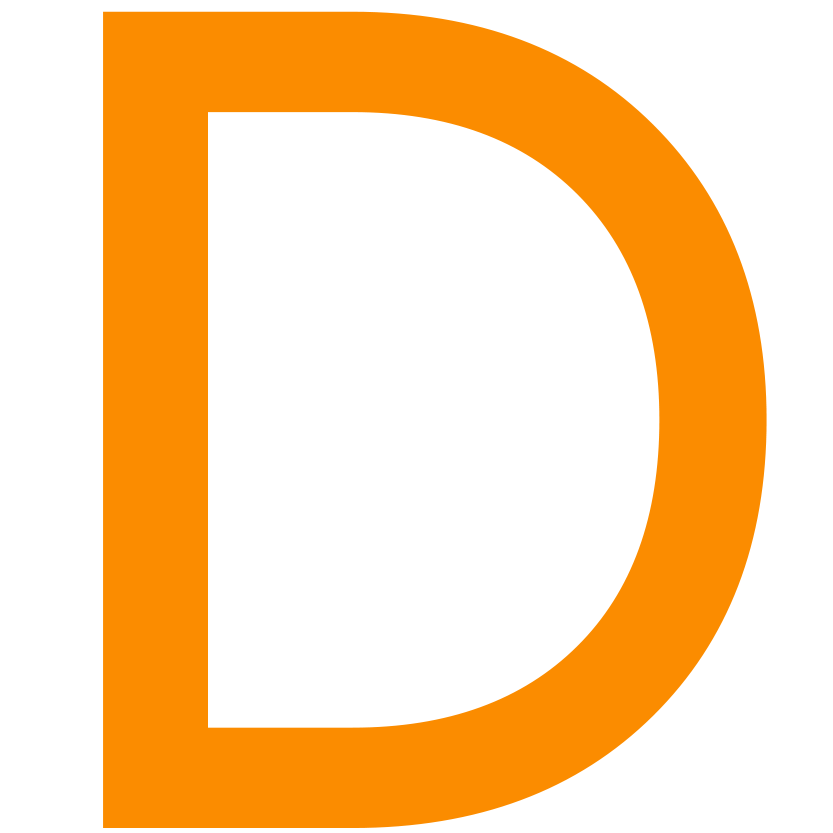
<style>
.page{position:relative;width:833px;height:833px;background:#ffffff}
.page>*{position:absolute;margin:0}
.t1{font:1140px "ProductSans-Regular";color:#fb8c00}
</style>
<div class="page">
<p class="t1" style="left:103px;top:11px;width:664px;height:817px">D</p>
</div>
